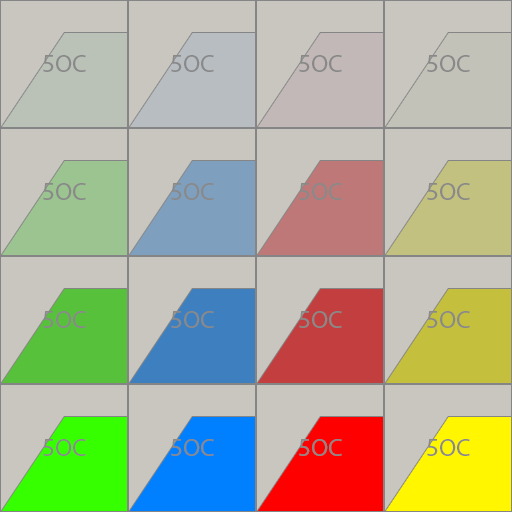
<style>
.page{position:relative;width:512px;height:512px;background:#c8c6bf}
.page>*{position:absolute;margin:0}
.t1{font:25px "MyriadPro-Regular";color:#898989}
</style>
<div class="page">
<p class="t1" style="left:43px;top:55px;width:43px;height:17px">5OC</p>
<p class="t1" style="left:171px;top:55px;width:43px;height:17px">5OC</p>
<p class="t1" style="left:299px;top:55px;width:43px;height:17px">5OC</p>
<p class="t1" style="left:427px;top:55px;width:43px;height:17px">5OC</p>
<p class="t1" style="left:43px;top:183px;width:43px;height:17px">5OC</p>
<p class="t1" style="left:171px;top:183px;width:43px;height:17px">5OC</p>
<p class="t1" style="left:299px;top:183px;width:43px;height:17px">5OC</p>
<p class="t1" style="left:427px;top:183px;width:43px;height:17px">5OC</p>
<p class="t1" style="left:43px;top:311px;width:43px;height:17px">5OC</p>
<p class="t1" style="left:171px;top:311px;width:43px;height:17px">5OC</p>
<p class="t1" style="left:299px;top:311px;width:43px;height:17px">5OC</p>
<p class="t1" style="left:427px;top:311px;width:43px;height:17px">5OC</p>
<p class="t1" style="left:43px;top:439px;width:43px;height:17px">5OC</p>
<p class="t1" style="left:171px;top:439px;width:43px;height:17px">5OC</p>
<p class="t1" style="left:299px;top:439px;width:43px;height:17px">5OC</p>
<p class="t1" style="left:427px;top:439px;width:43px;height:17px">5OC</p>
</div>
